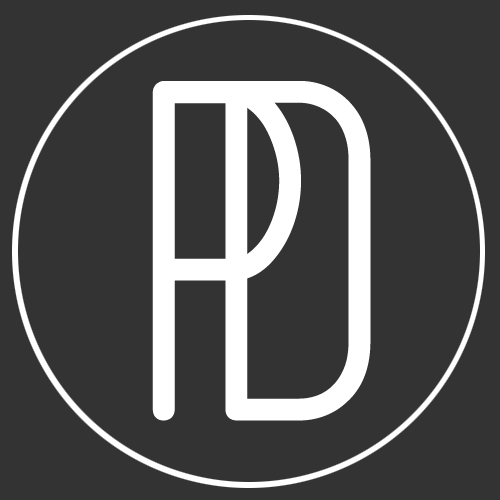
<style>
.page{position:relative;width:500px;height:500px;background:#333333}
.page>*{position:absolute;margin:0}
.t1{font:450px "MenschThin";color:#ffffff;font-weight:bold}
</style>
<div class="page">
<p class="t1" style="left:152px;top:81px;width:149px;height:340px">P</p>
<p class="t1" style="left:225px;top:81px;width:146px;height:340px">D</p>
</div>
